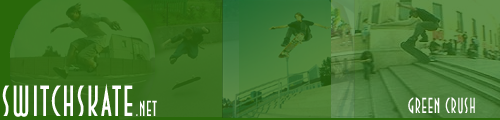
<style>
.page{position:relative;width:500px;height:120px}
.page>*{position:absolute;margin:0}
.t1{font:43.2px "DecoTechTL";letter-spacing:0.05em;color:#ffffff;scale:0.83 1}
.t2{font:21.6px "DecoTechTL";letter-spacing:0.05em;color:#ffffff;scale:0.83 1}
</style>
<div class="page">
<p class="t1" style="left:2px;top:83px;width:155px;height:34px">SWITchskate<span class="t2">.net</span></p>
<p class="t2" style="left:408px;top:97px;width:67px;height:17px">green crush</p>
</div>
